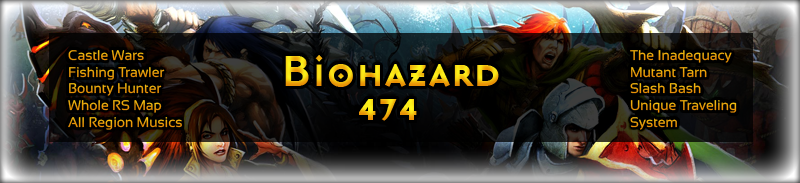
<style>
.page{position:relative;width:800px;height:183px}
.page>*{position:absolute;margin:0}
.t1{font:14px "Sansation-Regular";color:#ea9d09}
.t2{font:48px "MasonSansAlternateBold"}
</style>
<div class="page">
<p class="t1" style="left:68px;top:50px;width:114px;height:80px">Castle Wars<br>Fishing Trawler<br>Bounty Hunter<br>Whole RS Map<br>All Region Musics</p>
<p class="t1" style="left:630px;top:50px;width:107px;height:80px">The Inadequacy<br>Mutant Tarn<br>Slash Bash<br>Unique Traveling System</p>
<p class="t2" style="left:285px;top:55px;width:214px;height:32px">Biohazard</p>
<p class="t2" style="left:359px;top:99px;width:58px;height:22px">474</p>
</div>
